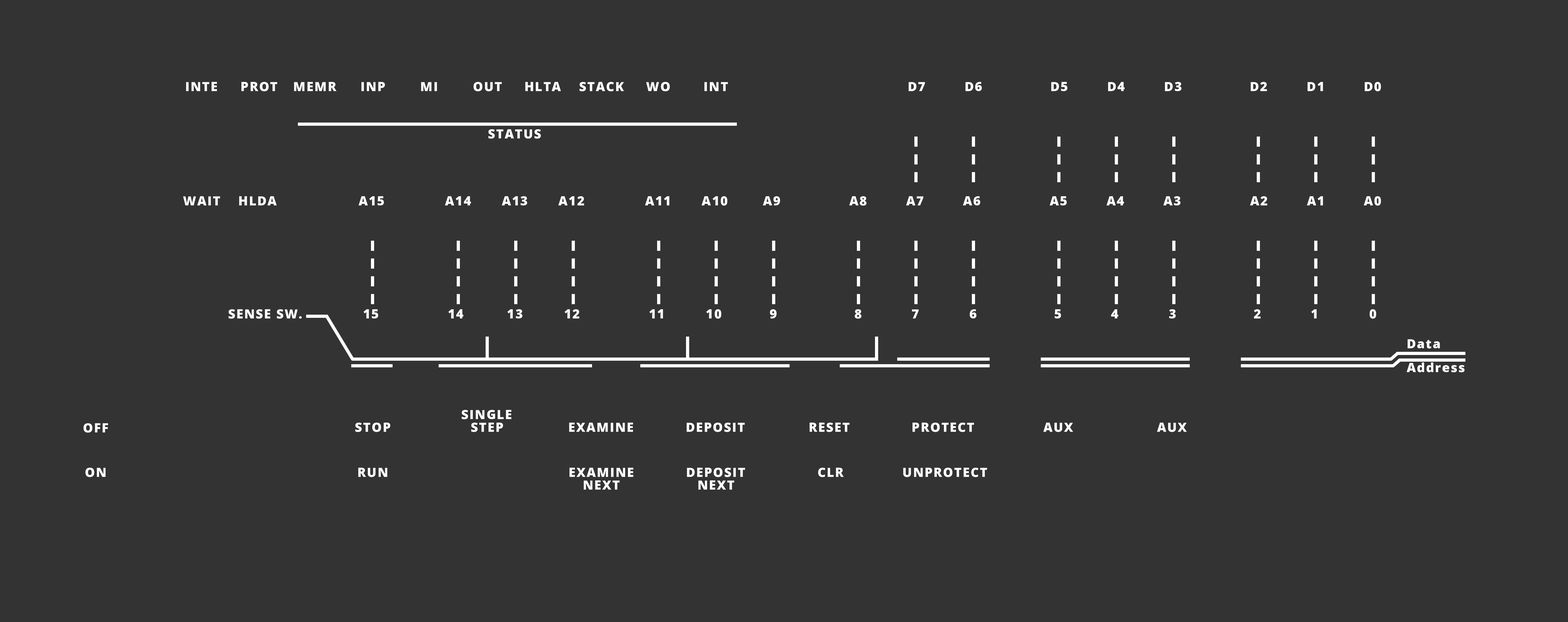
<style>
.page{position:relative;width:1568px;height:622px;background:#333333}
.page>*{position:absolute;margin:0}
.t1{font:12.7px "OpenSans-ExtraBold";letter-spacing:0.075em;color:#ffffff}
.t2{font:12.7px/7.9px "OpenSans-ExtraBold";letter-spacing:0.075em;color:#ffffff}
.t3{font:12.7px/12.7px "OpenSans-ExtraBold";letter-spacing:0.075em;color:#ffffff}
.t4{font:12.7px/14.8px "OpenSans-ExtraBold";letter-spacing:0.075em;color:#ffffff}
</style>
<div class="page">
<p class="t1" style="left:186px;top:82px;width:1195px;height:9px">INTE      PROT    MEMR      INP        MI        OUT     HLTA    STACK     WO        INT                                          D7         D6                D5         D4         D3                D2         D1         D0</p>
<p class="t1" style="left:488px;top:129px;width:53px;height:10px">STATUS</p>
<p class="t1" style="left:183px;top:196px;width:1198px;height:10px">WAIT    HLDA                   A15              A14       A13       A12              A11       A10        A9                A8         A7         A6                A5         A4         A3                A2         A1         A0</p>
<p class="t1" style="left:228px;top:309px;width:1148px;height:10px">SENSE SW.              15                14          13          12                11          10           9                  8            7            6                  5            4            3                  2            1            0</p>
<p class="t2" style="left:1407px;top:339px;width:57px;height:34px">Data<br><br><br>Address</p>
<p class="t2" style="left:355px;top:410px;width:832px;height:22px"><span class="t3">                         SINGLE  <br>STOP               </span>    STEP               EXAMINE            DEPOSIT               RESET               PROTECT                AUX                    AUX</p>
<p class="t4" style="left:84px;top:423px;width:24px;height:54px;text-align:center">OFF<br><br><br>ON</p>
<p class="t3" style="left:358px;top:468px;width:629px;height:22px">RUN                                           EXAMINE            DEPOSIT                 CLR              UNPROTECT<br>                                                     NEXT                  NEXT</p>
</div>
